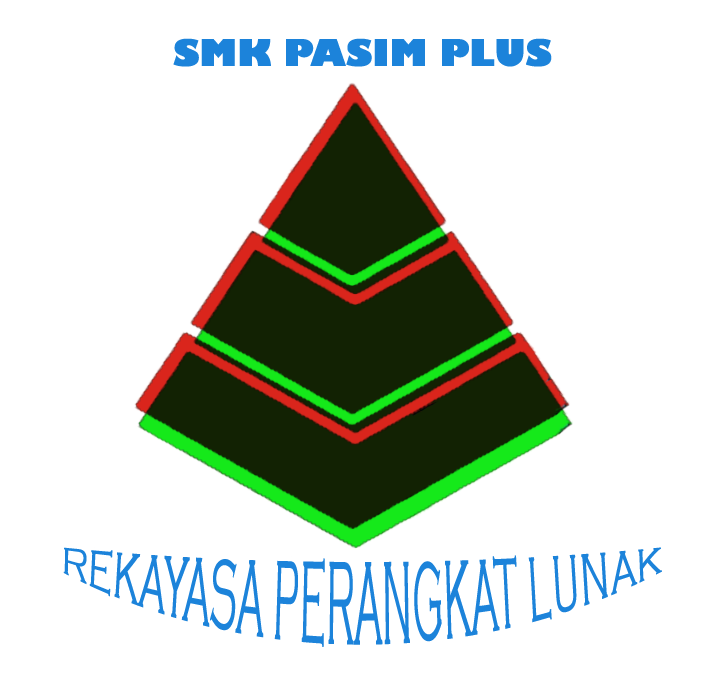
<style>
.page{position:relative;width:720px;height:690px;background:#ffffff}
.page>*{position:absolute;margin:0}
.t1{font:36px "GillSans-UltraBold";color:#1c83da}
.t2{font:36px "CopperplateGothic-Light";color:#1c83da}
</style>
<div class="page">
<p class="t1" style="left:173px;top:38px;width:379px;height:29px">SMK PASIM PLUS</p>
<p class="t2" style="left:63px;top:547px;width:599px;height:100px;text-align:center">REKAYASA PERANGKAT LUNAK</p>
</div>
